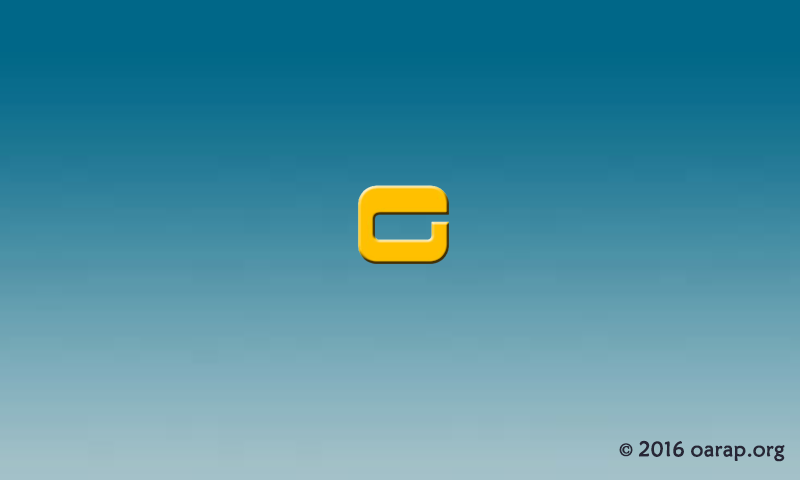
<style>
.page{position:relative;width:800px;height:480px}
.page>*{position:absolute;margin:0}
.t1{font:20.8px "STXinwei";color:#272636;font-weight:bold}
.t2{font:20.8px "AdobeSongStd-Light";color:#272636;font-weight:bold}
</style>
<div class="page">
<p class="t1" style="left:619px;top:440px;width:166px;height:22px"><span class="t2">© </span>2016 oarap.org</p>
</div>
